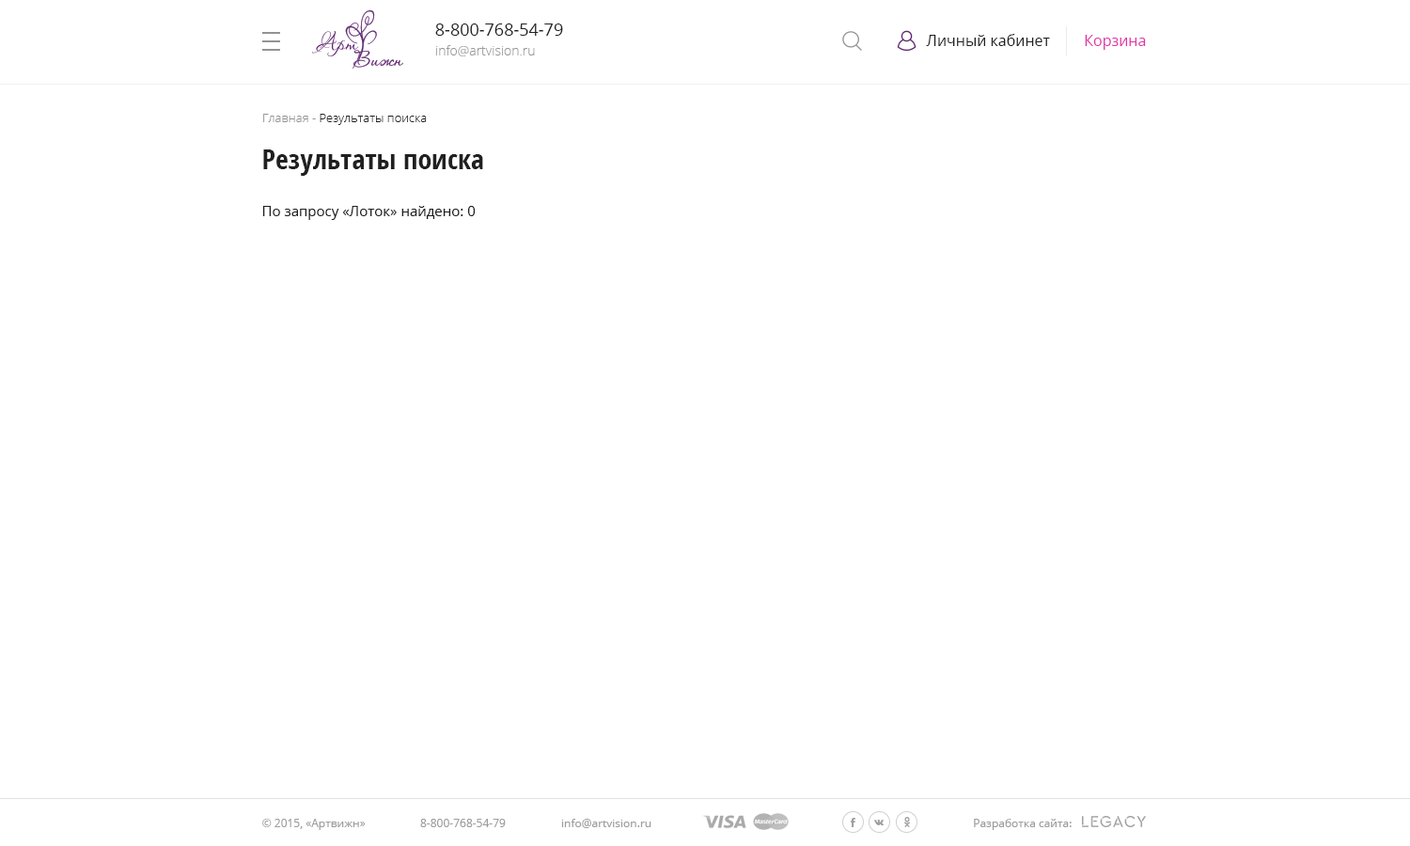
<style>
.page{position:relative;width:1410px;height:846px;background:#ffffff}
.page>*{position:absolute;margin:0}
.t1{font:16.9px "OpenSans";color:#202020}
.t2{font:15px "OpenSans";color:#202020}
.t3{font:15px "OpenSans";color:#e233a6}
.t4{font:13.2px "OpenSans-Light";color:#999999}
.t5{font:12.2px "OpenSans-Light";color:#202020}
.t6{font:12.2px "OpenSans-Light";color:#939393}
.t7{font:28.2px "OpenSans-CondensedBold";color:#202020}
.t8{font:14.1px "OpenSans";color:#202020}
.t9{font:11.3px "OpenSans";color:#9e9d9d}
</style>
<div class="page">
<p class="t1" style="left:435px;top:23px;width:128px;height:13px">8-800-768-54-79</p>
<p class="t2" style="left:926px;top:34px;width:124px;height:12px">Личный кабинет</p>
<p class="t3" style="left:1085px;top:35px;width:61px;height:15px">Корзина</p>
<p class="t4" style="left:436px;top:45px;width:99px;height:11px">info@artvision.ru</p>
<p class="t5" style="left:263px;top:114px;width:164px;height:11px"><span class="t6">Главная - </span>Результаты поиска</p>
<p class="t7" style="left:263px;top:149px;width:220px;height:27px">Результаты поиска</p>
<p class="t8" style="left:262px;top:206px;width:214px;height:14px">По запросу «Лоток» найдено: 0</p>
<p class="t9" style="left:262px;top:819px;width:104px;height:11px">© 2015, «Артвижн»</p>
<p class="t9" style="left:420px;top:819px;width:86px;height:8px">8-800-768-54-79</p>
<p class="t9" style="left:561px;top:819px;width:90px;height:9px">info@artvision.ru</p>
<p class="t9" style="left:974px;top:819px;width:97px;height:11px">Разработка сайта:</p>
</div>
